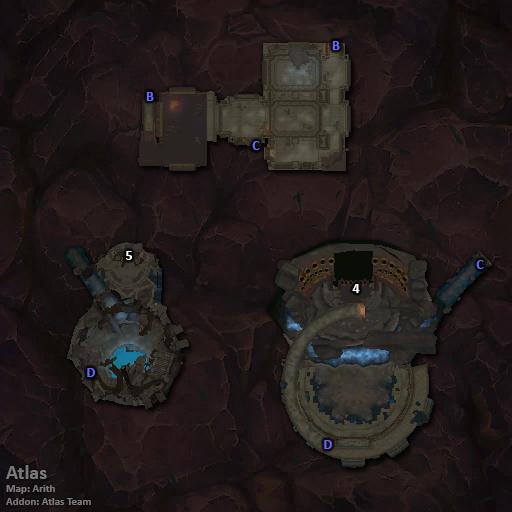
<style>
.page{position:relative;width:512px;height:512px}
.page>*{position:absolute;margin:0}
.t1{font:14px "Calibri-Bold";color:#6666ff}
.t2{font:14px "Calibri-Bold";color:#ffffff}
.t3{font:11px "Calibri-Bold";color:#7b7a7a}
.t4{font:20px "Calibri-Bold";color:#7b7a7a}
</style>
<div class="page">
<p class="t1" style="left:332px;top:41px;width:8px;height:9px">B</p>
<p class="t1" style="left:146px;top:92px;width:8px;height:9px">B</p>
<p class="t1" style="left:252px;top:141px;width:8px;height:9px">C</p>
<p class="t2" style="left:126px;top:251px;width:6px;height:9px">5</p>
<p class="t1" style="left:476px;top:260px;width:8px;height:9px">C</p>
<p class="t2" style="left:352px;top:284px;width:8px;height:9px">4</p>
<p class="t1" style="left:87px;top:368px;width:8px;height:9px">D</p>
<p class="t1" style="left:324px;top:440px;width:8px;height:9px">D</p>
<p class="t3" style="left:6px;top:465px;width:85px;height:40px"><span class="t4">Atlas<br></span>Map: Arith<br>Addon: Atlas Team</p>
</div>
